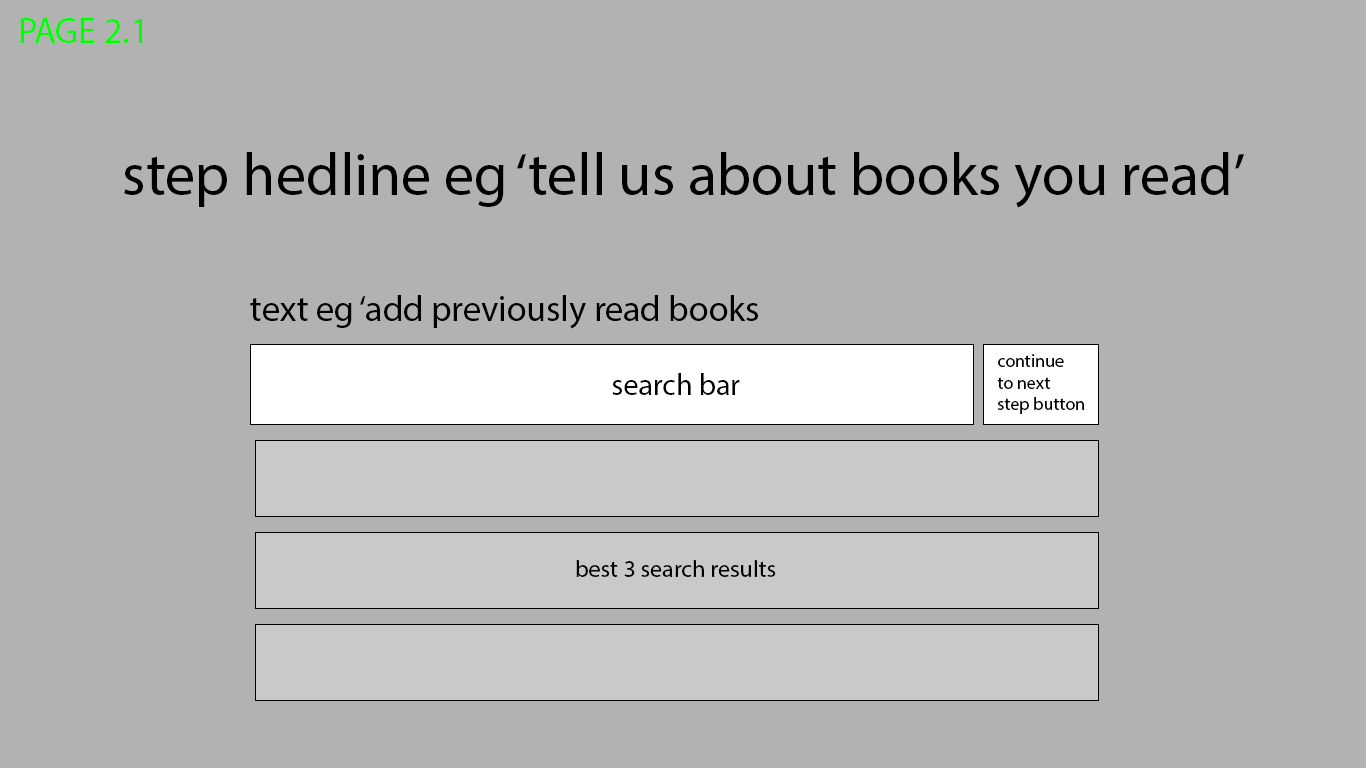
<style>
.page{position:relative;width:1366px;height:768px;background:#b2b2b2}
.page>*{position:absolute;margin:0}
.t1{font:36px "MyriadPro-Regular";color:#00ff04}
.t2{font:60px "MyriadPro-Regular";color:#000000}
.t3{font:36px "MyriadPro-Regular";color:#000000}
.t4{font:18px "MyriadPro-Regular";color:#000000}
.t5{font:30px "MyriadPro-Regular";color:#000000}
.t6{font:24px "MyriadPro-Regular";color:#000000}
</style>
<div class="page">
<p class="t1" style="left:20px;top:18px;width:122px;height:25px">PAGE 2.1</p>
<p class="t2" style="left:124px;top:152px;width:1120px;height:56px">step hedline eg ‘tell us about books you read’</p>
<p class="t3" style="left:250px;top:295px;width:508px;height:34px">text eg ‘add previously read books</p>
<p class="t4" style="left:997px;top:354px;width:87px;height:60px">continue<br>to next<br>step button</p>
<p class="t5" style="left:612px;top:373px;width:128px;height:22px">search bar</p>
<p class="t6" style="left:576px;top:560px;width:200px;height:17px">best 3 search results</p>
</div>
